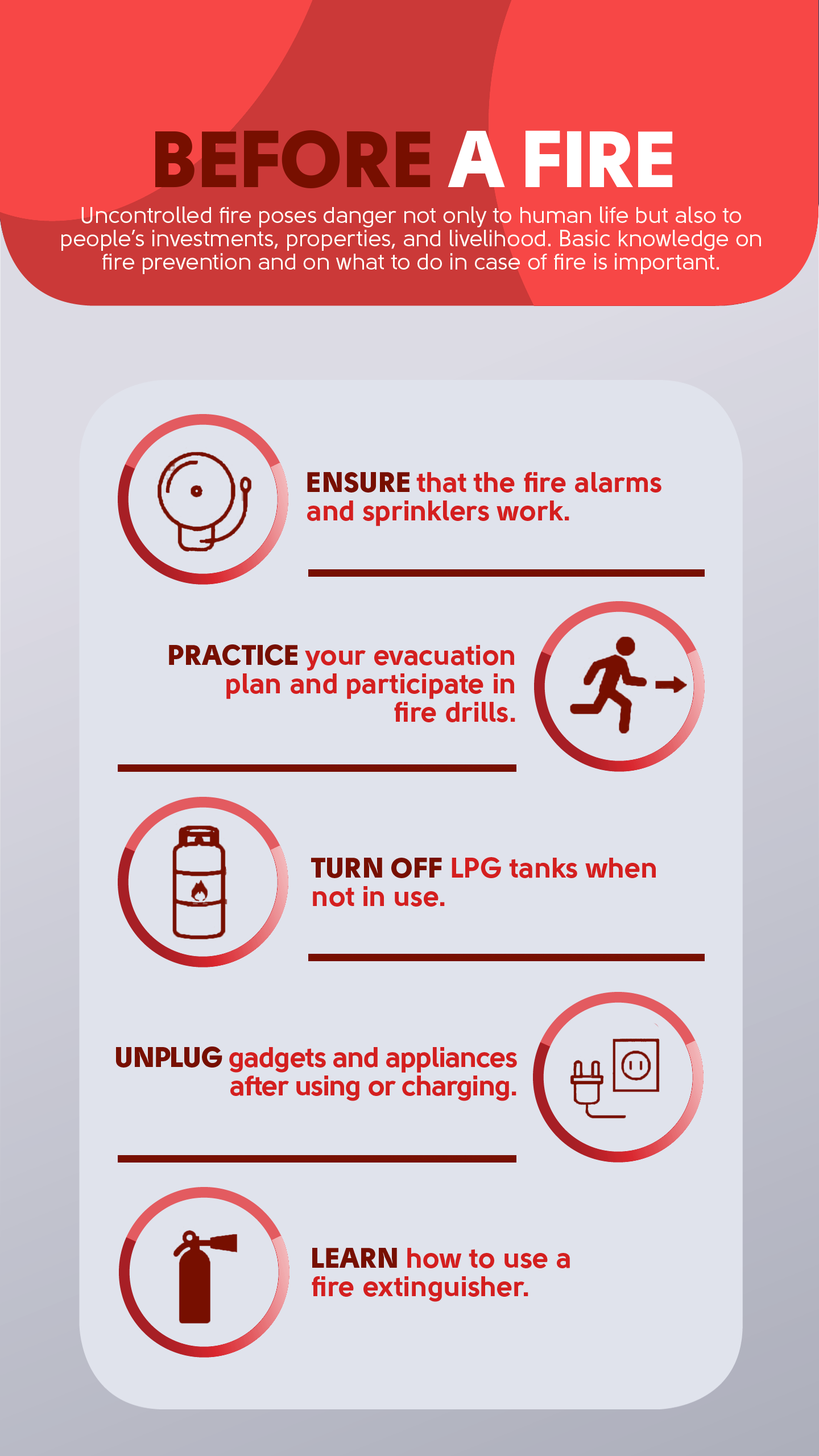
<style>
.page{position:relative;width:819px;height:1456px;background:#e0e3ec}
.page>*{position:absolute;margin:0}
.t1{font:79.6px "Solomon-Sans-Black";color:#770f00}
.t2{font:79.6px "Solomon-Sans-Black";color:#ffffff}
.t3{font:22.7px/23.3px "Solomon-Sans-Normal";color:#fffef8}
.t4{font:28.4px/28.4px "Solomon-Sans-Bold";color:#d41f1f}
.t5{font:28.4px/28.4px "Solomon-Sans-Black";color:#770f00}
.t6{font:28.4px/28.4px "Solomon-Sans-Bold";letter-spacing:-0.025em;color:#d41f1f}
.t7{font:28.4px/28.4px "Solomon-Sans-Black";letter-spacing:-0.025em;color:#770f00}
</style>
<div class="page">
<p class="t1" style="left:155px;top:130px;width:518px;height:58px">BEFORE<span class="t2"> A FIRE</span></p>
<p class="t3" style="left:61px;top:206px;width:700px;height:68px;text-align:center">Uncontrolled fire poses danger not only to human life but also to<br>people’s investments, properties, and livelihood. Basic knowledge on<br>fire prevention and on what to do in case of fire is important.</p>
<p class="t4" style="left:307px;top:472px;width:354px;height:54px"><span class="t5">ENSURE </span>that the fire alarms<br>and sprinklers work.</p>
<p class="t4" style="left:169px;top:644px;width:346px;height:78px;text-align:right"><span class="t5">PRACTICE </span>your evacuation<br>plan and participate in<br>fire drills.</p>
<p class="t4" style="left:311px;top:857px;width:345px;height:50px"><span class="t5">TURN OFF </span>LPG tanks when<br>not in use.</p>
<p class="t6" style="left:116px;top:1046px;width:401px;height:55px;text-align:right"><span class="t7">UNPLUG </span>gadgets and appliances<br>after using or charging.</p>
<p class="t4" style="left:312px;top:1248px;width:258px;height:54px"><span class="t5">LEARN </span>how to use a<br>fire extinguisher.</p>
</div>
